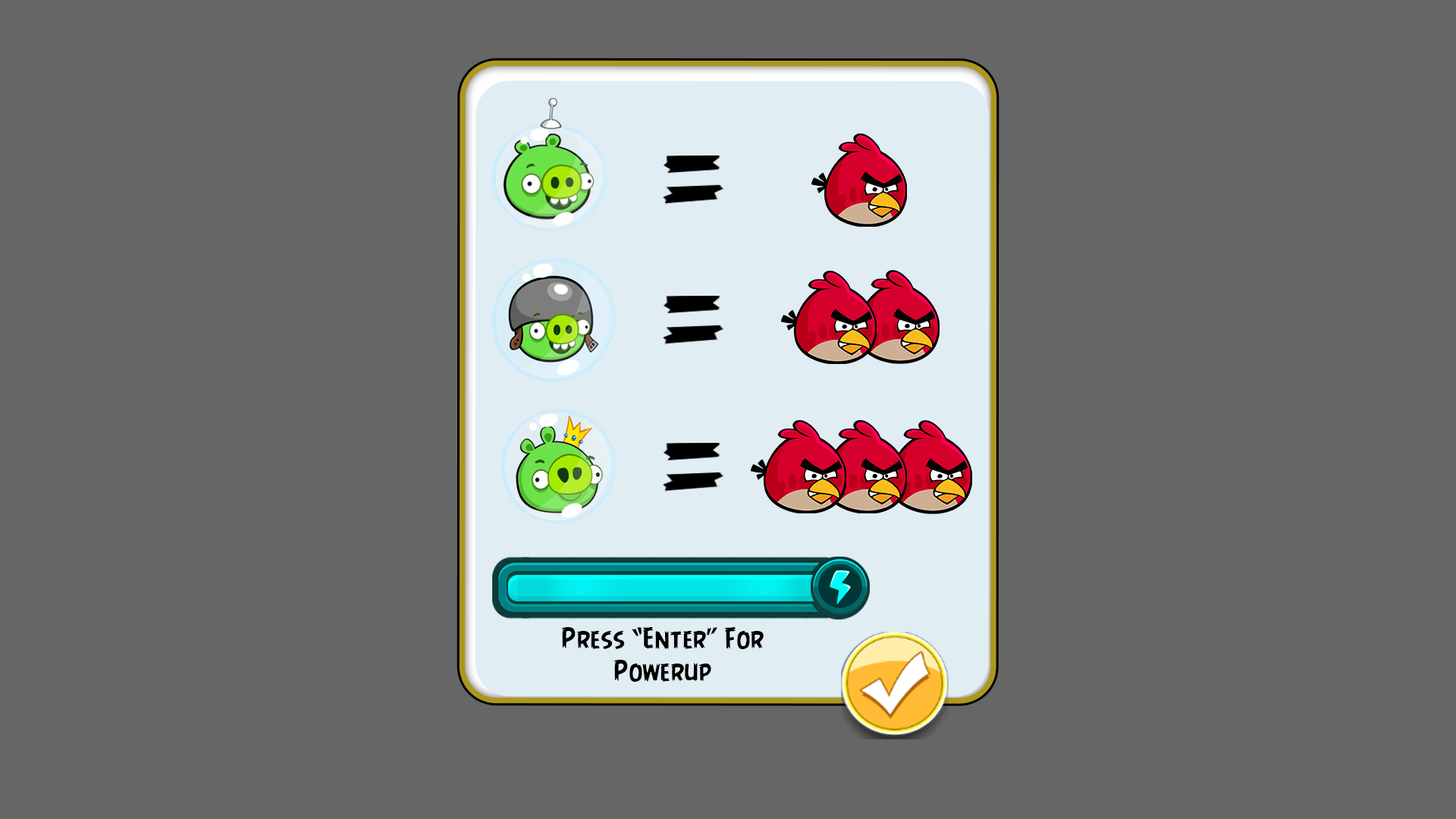
<style>
.page{position:relative;width:1456px;height:819px;background:#666666}
.page>*{position:absolute;margin:0}
.t1{font:27.3px "AngryBirds-Regular";color:#000000}
</style>
<div class="page">
<p class="t1" style="left:561px;top:626px;width:203px;height:56px;text-align:center">Press “Enter” For<br>Powerup</p>
</div>
